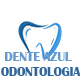
<style>
.page{position:relative;width:80px;height:80px;background:#ffffff}
.page>*{position:absolute;margin:0}
.t1{font:12.5px "BritannicBold";color:#336699}
.t2{font:12.5px "BritannicBold";color:#3366cc}
.t3{font:12.5px "BritannicBold";color:#6699cc}
</style>
<div class="page">
<p class="t1" style="left:1px;top:52px;width:80px;height:24px"><span class="t2"> </span><span class="t3">DENTE AZUL<br></span>ODONTOLOGIA</p>
</div>
